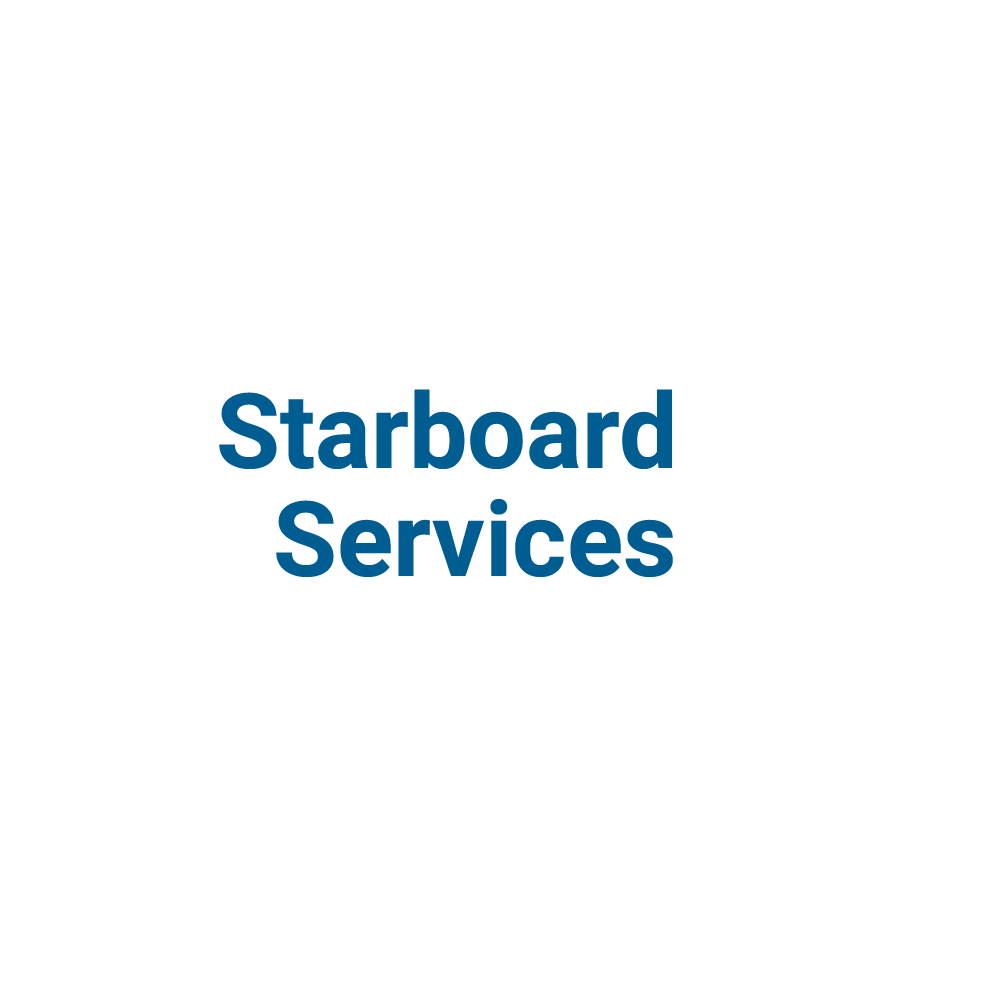
<style>
.page{position:relative;width:1000px;height:1000px;background:#ffffff}
.page>*{position:absolute;margin:0}
.t1{font:104.2px "Roboto-Bold";color:#005d92}
</style>
<div class="page">
<p class="t1" style="left:219px;top:389px;width:453px;height:80px">Starboard</p>
<p class="t1" style="left:276px;top:498px;width:397px;height:79px">Services</p>
</div>
